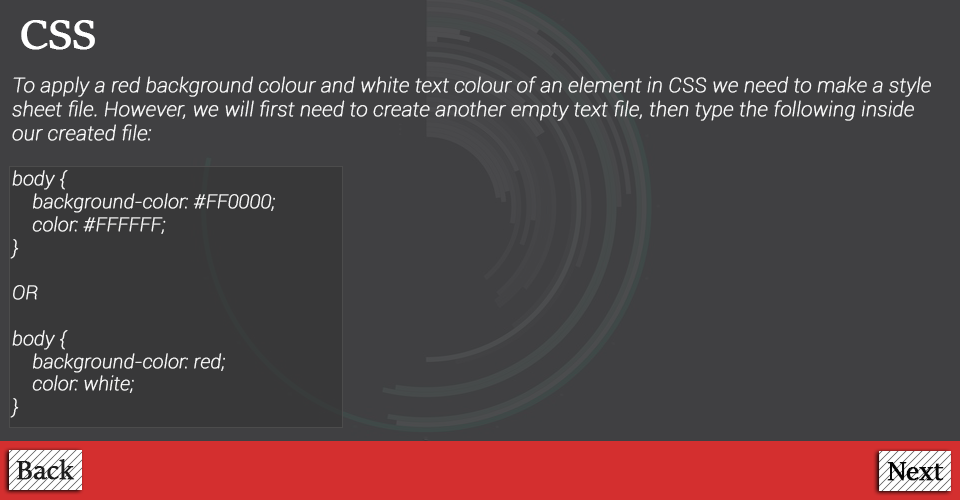
<style>
.page{position:relative;width:960px;height:500px;background:#404042}
.page>*{position:absolute;margin:0}
.t1{font:48px "SitkaBanner";color:#ffffff;font-weight:bold}
.t2{font:20px "Roboto-ThinItalic";color:#ffffff;font-weight:bold}
.t3{font:19px "Roboto-ThinItalic";color:#ffffff;font-weight:bold}
.t4{font:30px "SitkaBanner";color:#1e1e1e;font-weight:bold}
.t5{font:30px "SitkaBanner";color:#060606;font-weight:bold}
</style>
<div class="page">
<p class="t1" style="left:21px;top:20px;width:74px;height:30px">CSS</p>
<p class="t2" style="left:10px;top:76px;width:921px;height:342px">To apply a red background colour and white text colour of an element in CSS we need to make a style sheet file. However, we will first need to create another empty text file, then type the following inside our created file:<br><span class="t3"><br>body {<br>    background-color: #FF0000;<br>    color: #FFFFFF;<br>}<br><br>OR<br><br>body {<br>    background-color: red;<br>    color: white;<br>}</span></p>
<p class="t4" style="left:16px;top:459px;width:59px;height:21px">Back</p>
<p class="t5" style="left:887px;top:462px;width:57px;height:19px">Next</p>
</div>
